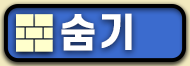
<style>
.page{position:relative;width:190px;height:66px}
.page>*{position:absolute;margin:0}
.t1{font:39px "S-CoreDream-6Bold";color:#ffffff;font-weight:bold}
</style>
<div class="page">
<p class="t1" style="left:61px;top:13px;width:71px;height:38px">숨기</p>
</div>
